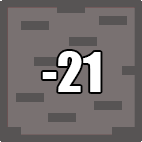
<style>
.page{position:relative;width:142px;height:142px;background:#797171}
.page>*{position:absolute;margin:0}
.t1{font:51px "Impact";color:#ffffff}
</style>
<div class="page">
<p class="t1" style="left:42px;top:51px;width:59px;height:41px">-21</p>
</div>
